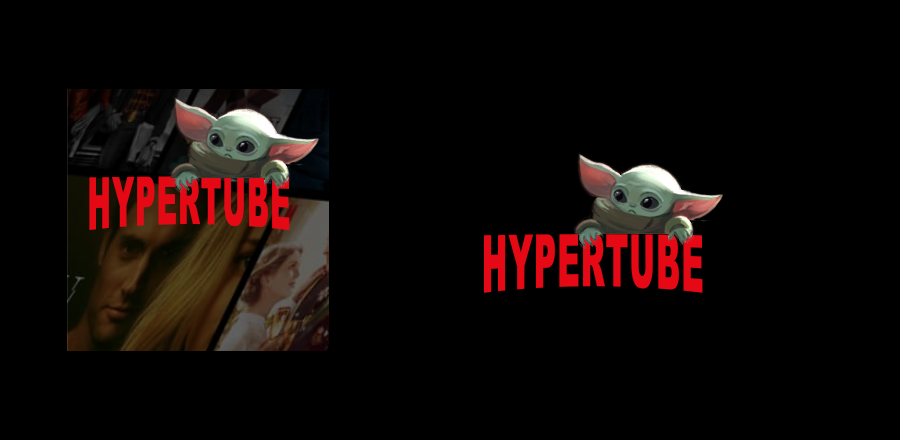
<style>
.page{position:relative;width:900px;height:440px;background:#000000}
.page>*{position:absolute;margin:0}
.t1{font:80.2px "Arial-Black";letter-spacing:0.03em;color:#e50915;scale:0.39 1}
</style>
<div class="page">
<p class="t1" style="left:484px;top:234px;width:219px;height:59px">HYPERTUBE</p>
</div>
